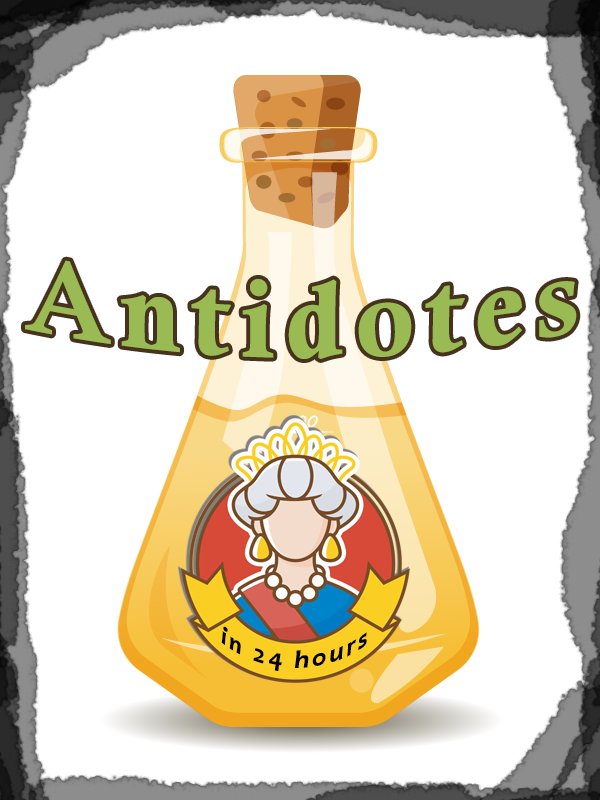
<style>
.page{position:relative;width:600px;height:800px;background:#ffffff}
.page>*{position:absolute;margin:0}
.t1{font:108.3px "CalisMTBol";letter-spacing:0.1em;color:#9abb53}
.t2{font:25px/65.3px "Candara-BoldItalic";letter-spacing:0.1em;color:#000000;scale:1.06 1}
</style>
<div class="page">
<p class="t1" style="left:25px;top:260px;width:552px;height:99px">Antidotes</p>
<p class="t2" style="left:221px;top:626px;width:146px;height:45px;text-align:center">in 24 hours</p>
</div>
